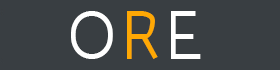
<style>
.page{position:relative;width:280px;height:70px;background:#393e42}
.page>*{position:absolute;margin:0}
.t1{font:65px "Bakersfield-Bold";letter-spacing:0.1em;color:#ffffff}
.t2{font:65px "Bakersfield-Bold";letter-spacing:0.1em;color:#ffa804}
</style>
<div class="page">
<p class="t1" style="left:71px;top:11px;width:130px;height:48px">O<span class="t2">R</span>E</p>
</div>
